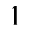
<style>
.page{position:relative;width:30px;height:30px;background:#ffffff}
.page>*{position:absolute;margin:0}
.t1{font:29px "Schwarzwald";color:#000000}
</style>
<div class="page">
<p class="t1" style="left:12px;top:6px;width:6px;height:19px">1</p>
</div>
